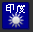
<style>
.page{position:relative;width:33px;height:32px;background:#000090}
.page>*{position:absolute;margin:0}
.t1{font:10.4px "SimSun";color:#ffffff}
</style>
<div class="page">
<p class="t1" style="left:6px;top:4px;width:19px;height:9px">印度</p>
</div>
